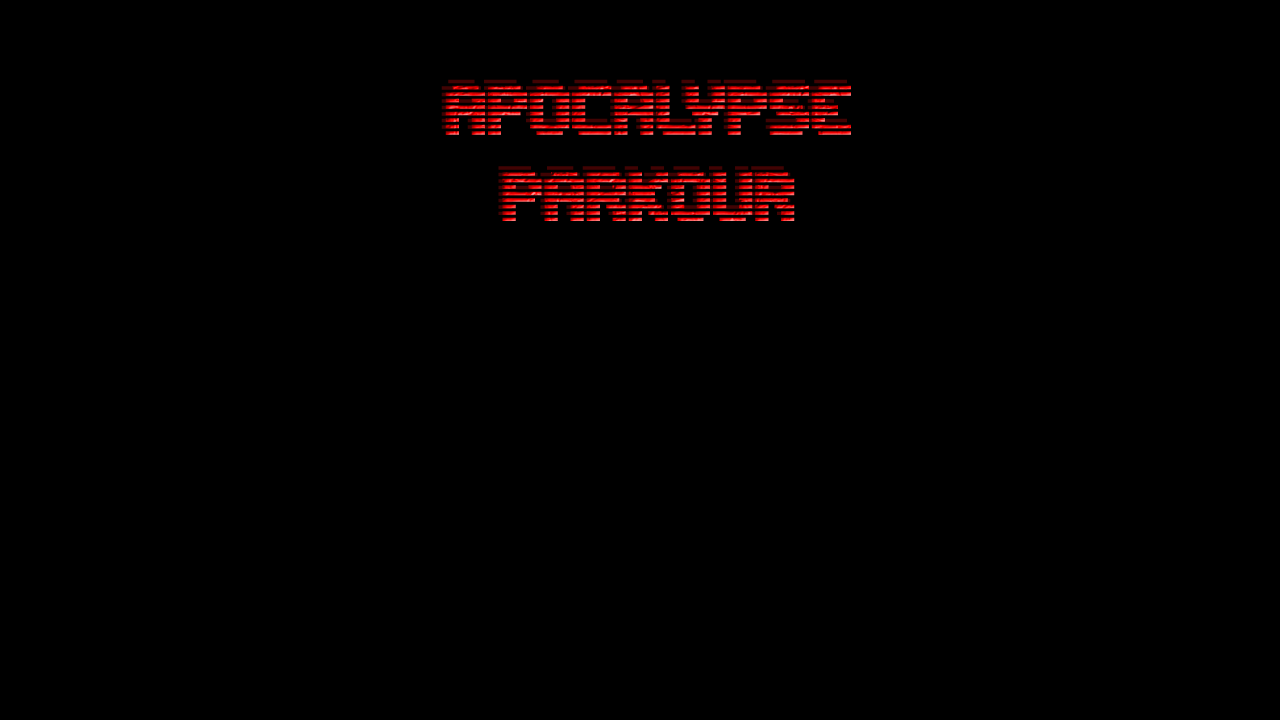
<style>
.page{position:relative;width:1280px;height:720px;background:#000000}
.page>*{position:absolute;margin:0}
.t1{font:72px "EditUndoLineBRK"}
</style>
<div class="page">
<p class="t1" style="left:445px;top:85px;width:406px;height:136px;text-align:center">APOCALYPSE <br>PARKOUR</p>
</div>
